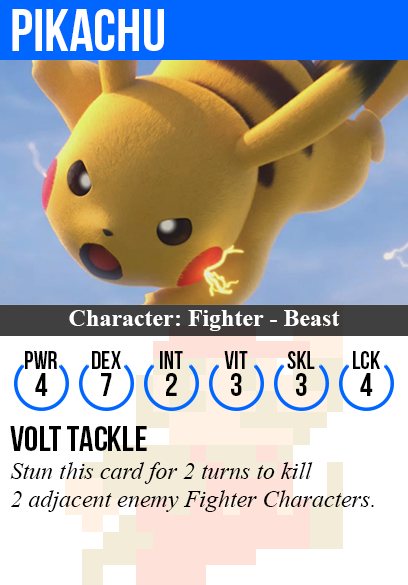
<style>
.page{position:relative;width:408px;height:585px;background:#ffffff}
.page>*{position:absolute;margin:0}
.t1{font:60px "BebasNeue";color:#ffffff}
.t2{font:24px "TimesNewRomanPS-BoldMT";color:#ffffff}
.t3{font:25px "BebasNeue";color:#000000}
.t4{font:32px "BebasNeue";color:#000000}
.t5{font:36px "BebasNeue";color:#000000}
.t6{font:24px "TimesNewRomanPS-ItalicMT";color:#000000}
</style>
<div class="page">
<p class="t1" style="left:12px;top:9px;width:152px;height:42px">pikachu</p>
<p class="t2" style="left:69px;top:310px;width:271px;height:21px">Character: Fighter - Beast</p>
<p class="t3" style="left:25px;top:351px;width:32px;height:18px">PWR</p>
<p class="t3" style="left:92px;top:351px;width:29px;height:18px">dex</p>
<p class="t3" style="left:160px;top:351px;width:23px;height:18px">int</p>
<p class="t3" style="left:224px;top:351px;width:24px;height:18px">vit</p>
<p class="t3" style="left:287px;top:351px;width:28px;height:18px">skl</p>
<p class="t3" style="left:353px;top:351px;width:27px;height:18px">lck</p>
<p class="t4" style="left:35px;top:373px;width:13px;height:23px">4</p>
<p class="t4" style="left:101px;top:373px;width:11px;height:23px">7</p>
<p class="t4" style="left:166px;top:373px;width:11px;height:23px">2</p>
<p class="t4" style="left:231px;top:373px;width:11px;height:23px">3</p>
<p class="t4" style="left:296px;top:373px;width:11px;height:23px">3</p>
<p class="t4" style="left:360px;top:373px;width:13px;height:23px">4</p>
<p class="t5" style="left:10px;top:426px;width:137px;height:25px">volt tackle</p>
<p class="t6" style="left:10px;top:462px;width:364px;height:50px">Stun this card for 2 turns to kill<br>2 adjacent enemy Fighter Characters.</p>
</div>
